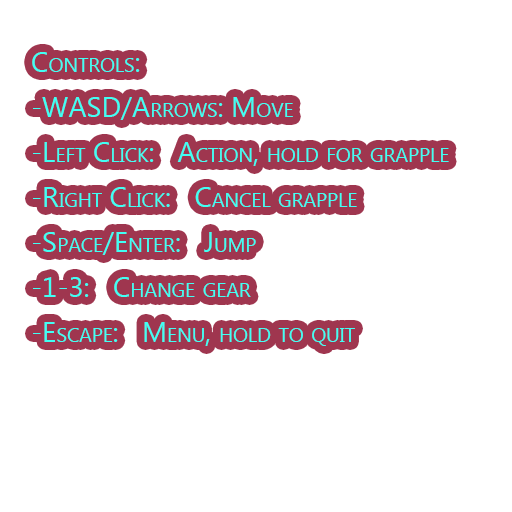
<style>
.page{position:relative;width:512px;height:512px;background:#ffffff}
.page>*{position:absolute;margin:0}
.t1{font:28.1px/45px "MicrosoftNewTaiLue";color:#40fff4;font-variant:small-caps}
</style>
<div class="page">
<p class="t1" style="left:32px;top:52px;width:417px;height:294px">Controls:<br>-WASD/Arrows: Move<br>-Left Click:   Action, hold for grapple<br>-Right Click:   Cancel grapple<br>-Space/Enter:   Jump<br>-1-3:   Change gear<br>-Escape:   Menu, hold to quit</p>
</div>
